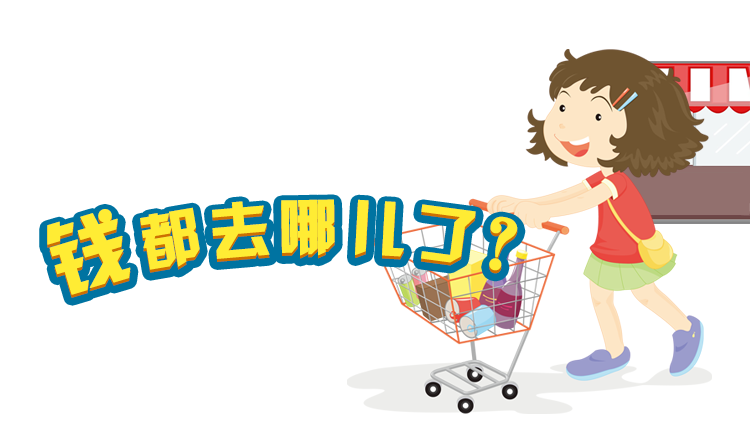
<style>
.page{position:relative;width:750px;height:430px;background:#ffffff}
.page>*{position:absolute;margin:0}
.t1{font:60px "HYk2gj";letter-spacing:0.1em;color:#ffec34;font-weight:bold}
.t2{font:80px "HYk2gj";letter-spacing:0.1em;color:#ffec34;font-weight:bold}
</style>
<div class="page">
<p class="t1" style="left:47px;top:202px;width:471px;height:96px"><span class="t2">钱</span>都去哪儿了？</p>
<p class="t1" style="left:47px;top:199px;width:471px;height:96px"><span class="t2">钱</span>都去哪儿了？</p>
</div>
